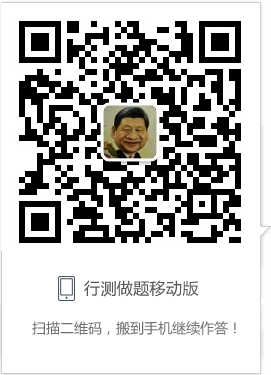
<style>
.page{position:relative;width:271px;height:375px;background:#ffffff}
.page>*{position:absolute;margin:0}
.t1{font:16px "MicrosoftYaHei";letter-spacing:0.025em;color:#555555}
.t2{font:14px "MicrosoftYaHei";color:#707070}
</style>
<div class="page">
<p class="t1" style="left:84px;top:280px;width:115px;height:17px">行测做题移动版</p>
<p class="t2" style="left:32px;top:321px;width:204px;height:14px">扫描二维码，搬到手机继续作答！</p>
</div>
